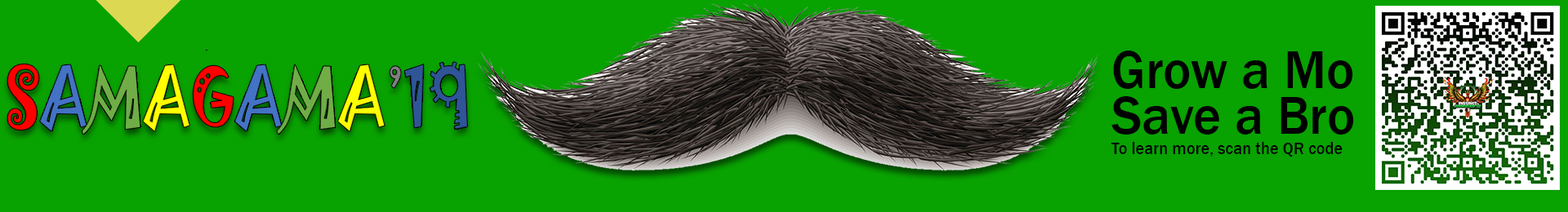
<style>
.page{position:relative;width:1568px;height:212px;background:#08a201}
.page>*{position:absolute;margin:0}
.t1{font:17px "FranklinGothic-Medium";color:#000000}
.t2{font:54.4px/45.7px "FranklinGothic-Medium";color:#000000}
.t3{font:9.8px/45.7px "FranklinGothic-Medium";color:#000000}
</style>
<div class="page">
<p class="t1" style="left:1111px;top:51px;width:243px;height:106px"><span class="t2">Grow a Mo<br>Save a Bro</span><span class="t3"> <br></span>To learn more, scan the QR code</p>
</div>
